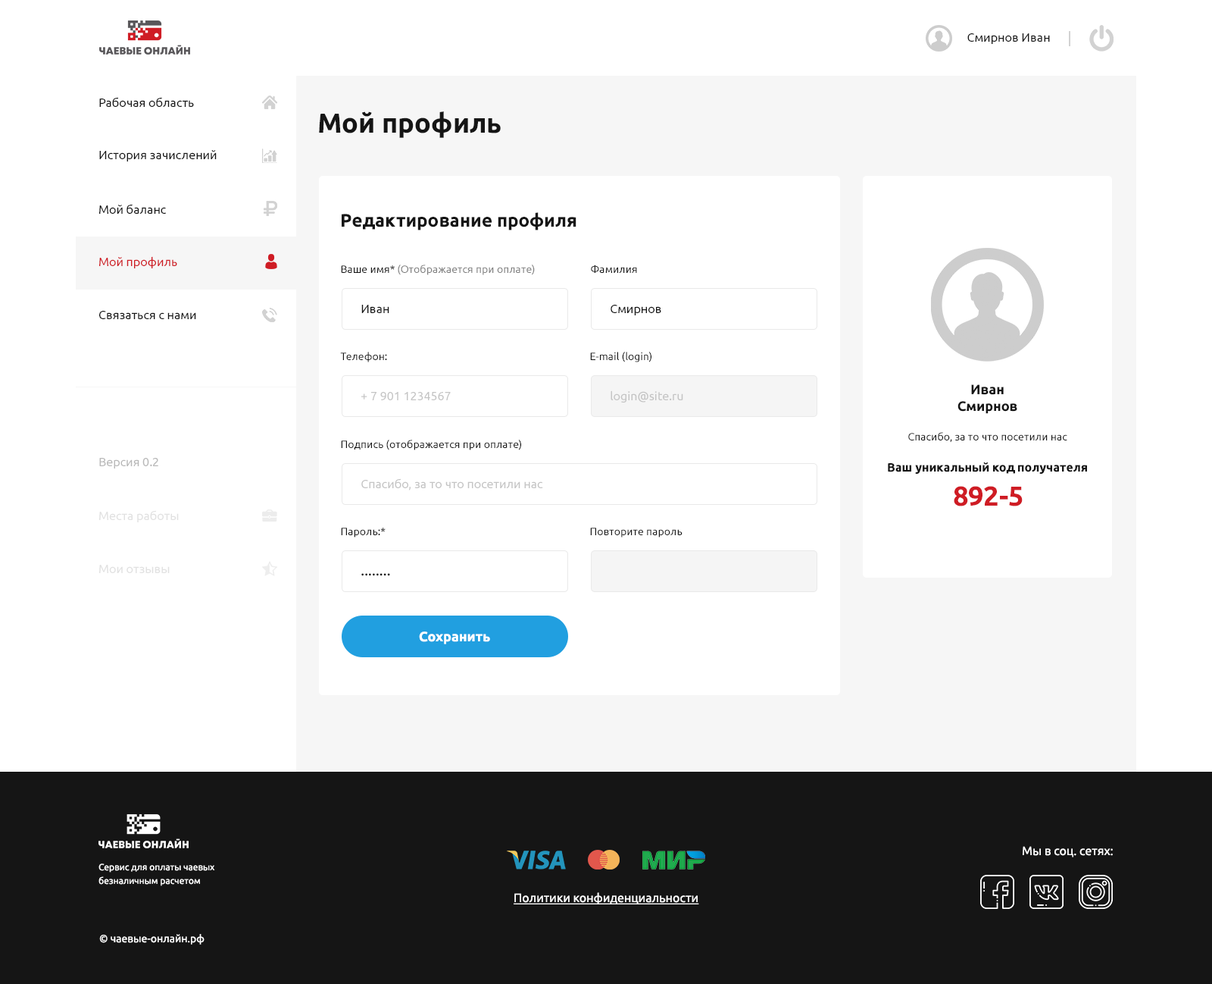
<style>
.page{position:relative;width:1212px;height:984px;background:#ffffff}
.page>*{position:absolute;margin:0}
.t1{font:12.1px "Ubuntu-Regular";color:#151515}
.t2{font:27.3px "Ubuntu-Bold";color:#151515}
.t3{font:18.2px "Ubuntu-Bold";color:#151515}
.t4{font:12.1px "Ubuntu-Regular";color:#cf1c24}
.t5{font:10.6px "Ubuntu-Regular";color:#7e7e7e}
.t6{font:10.6px "Ubuntu-Regular";color:#151515}
.t7{font:13.6px "Ubuntu-Bold";color:#151515}
.t8{font:12.1px "Ubuntu-Regular";color:#c4c4c4}
.t9{font:12.1px "Ubuntu-Regular";color:#b8b8b8}
.t10{font:12.1px "Ubuntu-Bold";color:#151515}
.t11{font:27.3px "Ubuntu-Bold";color:#cf1c24}
.t12{font:12.1px "Ubuntu-Regular";color:#e1e1e1}
.t13{font:15.2px "Ubuntu-Regular";color:#151515}
.t14{font:13.6px "Ubuntu-Bold";color:#ffffff}
.t15{font:12.1px "Ubuntu-Regular";color:#ffffff}
.t16{font:9.1px/6.8px "Ubuntu-Regular";color:#ffffff}
.t17{font:12.1px "Ubuntu-Regular";color:#ffffff;text-decoration:underline}
.t18{font:10.6px "Ubuntu-Regular";color:#ffffff}
</style>
<div class="page">
<p class="t1" style="left:968px;top:33px;width:82px;height:11px">Смирнов Иван</p>
<p class="t1" style="left:99px;top:97px;width:95px;height:10px">Рабочая область</p>
<p class="t2" style="left:319px;top:111px;width:182px;height:27px">Мой профиль</p>
<p class="t1" style="left:99px;top:150px;width:118px;height:11px">История зачислений</p>
<p class="t1" style="left:99px;top:204px;width:67px;height:10px">Мой баланс</p>
<p class="t3" style="left:342px;top:212px;width:235px;height:18px">Редактирование профиля</p>
<p class="t4" style="left:99px;top:256px;width:78px;height:12px">Мой профиль</p>
<p class="t5" style="left:341px;top:264px;width:194px;height:11px"><span class="t6">Ваше имя*</span> (Отображается при оплате)</p>
<p class="t6" style="left:591px;top:264px;width:46px;height:9px">Фамилия</p>
<p class="t1" style="left:361px;top:305px;width:28px;height:8px">Иван</p>
<p class="t1" style="left:611px;top:305px;width:51px;height:10px">Смирнов</p>
<p class="t1" style="left:99px;top:311px;width:97px;height:8px">Связаться с нами</p>
<p class="t6" style="left:340px;top:352px;width:47px;height:10px">Телефон:</p>
<p class="t6" style="left:590px;top:352px;width:62px;height:10px">E-mail (login)</p>
<p class="t7" style="left:958px;top:384px;width:60px;height:30px;text-align:center">Иван<br>Смирнов</p>
<p class="t8" style="left:361px;top:392px;width:90px;height:8px">+ 7 901 1234567</p>
<p class="t8" style="left:611px;top:390px;width:72px;height:12px">login@site.ru</p>
<p class="t6" style="left:909px;top:432px;width:159px;height:11px">Спасибо, за то что посетили нас</p>
<p class="t6" style="left:341px;top:439px;width:180px;height:11px">Подпись (отображается при оплате)</p>
<p class="t9" style="left:99px;top:458px;width:59px;height:10px">Версия 0.2</p>
<p class="t10" style="left:888px;top:461px;width:199px;height:13px">Ваш уникальный код получателя</p>
<p class="t8" style="left:361px;top:478px;width:182px;height:12px">Спасибо, за то что посетили нас</p>
<p class="t11" style="left:954px;top:486px;width:69px;height:20px">892-5</p>
<p class="t12" style="left:99px;top:510px;width:80px;height:12px">Места работы</p>
<p class="t6" style="left:341px;top:527px;width:45px;height:10px">Пароль:*</p>
<p class="t6" style="left:590px;top:527px;width:93px;height:10px">Повторите пароль</p>
<p class="t12" style="left:99px;top:565px;width:71px;height:8px">Мои отзывы</p>
<p class="t13" style="left:361px;top:573px;width:29px;height:3px">........</p>
<p class="t14" style="left:419px;top:631px;width:71px;height:13px">Сохранить</p>
<p class="t15" style="left:1023px;top:846px;width:90px;height:11px">Мы в соц. сетях:</p>
<p class="t16" style="left:99px;top:863px;width:116px;height:23px">Сервис для оплаты чаевых<br><br>безналичным расчетом</p>
<p class="t17" style="left:514px;top:892px;width:185px;height:12px">Политики конфиденциальности</p>
<p class="t18" style="left:99px;top:934px;width:106px;height:10px">© чаевые-онлайн.рф</p>
</div>
